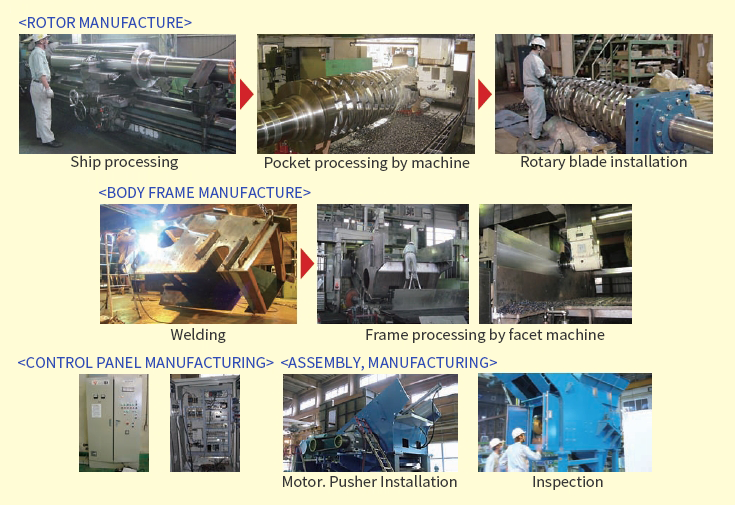
<style>
.page{position:relative;width:735px;height:505px;background:#fffcd6}
.page>*{position:absolute;margin:0}
.t1{font:14.6px "NotoSansCJKkr-Regular";color:#2f4db7;text-transform:uppercase}
.t2{font:14.6px "NotoSansCJKkr-Regular";color:#363636}
</style>
<div class="page">
<p class="t1" style="left:19px;top:17px;width:173px;height:11px">&lt;Rotor manufacture&gt;</p>
<p class="t2" style="left:71px;top:155px;width:107px;height:15px">Ship processing</p>
<p class="t2" style="left:265px;top:156px;width:205px;height:15px">Pocket processing by machine</p>
<p class="t2" style="left:521px;top:155px;width:166px;height:15px">Rotary blade installation</p>
<p class="t1" style="left:99px;top:187px;width:212px;height:11px">&lt;Body frame manufacture&gt;</p>
<p class="t2" style="left:170px;top:328px;width:56px;height:15px">Welding</p>
<p class="t2" style="left:366px;top:328px;width:239px;height:15px">Frame processing by facet machine</p>
<p class="t1" style="left:18px;top:357px;width:256px;height:11px">&lt;Control panel manufacturing&gt;</p>
<p class="t1" style="left:281px;top:357px;width:216px;height:14px">&lt;Assembly, Manufacturing&gt;</p>
<p class="t2" style="left:283px;top:475px;width:174px;height:12px">Motor. Pusher Installation</p>
<p class="t2" style="left:533px;top:476px;width:70px;height:14px">Inspection</p>
</div>
